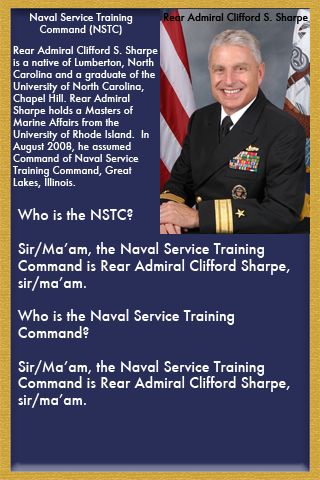
<style>
.page{position:relative;width:320px;height:480px;background:#292e59}
.page>*{position:absolute;margin:0}
.t1{font:10px "Futura-Medium";color:#ffffff}
.t2{font:10px "Futura-Medium";color:#000000}
.t3{font:14px "Futura-Medium";color:#ffffff}
</style>
<div class="page">
<p class="t1" style="left:30px;top:13px;width:103px;height:22px;text-align:center">Naval Service Training<br>Command (NSTC)</p>
<p class="t2" style="left:164px;top:13px;width:144px;height:11px">Rear Admiral Clifford S. Sharpe</p>
<p class="t1" style="left:12px;top:46px;width:146px;height:142px">Rear Admiral Clifford S. Sharpe <br>is a native of Lumberton, North <br>Carolina and a graduate of the <br>University of North Carolina, <br>Chapel Hill. Rear Admiral <br>Sharpe holds a Masters of <br>Marine Affairs from the <br>University of Rhode Island.  In <br>August 2008, he assumed <br>Command of Naval Service <br>Training Command, Great <br>Lakes, Illinois.</p>
<p class="t3" style="left:17px;top:208px;width:273px;height:200px">Who is the NSTC?<br><br>Sir/Ma’am, the Naval Service Training<br>Command is Rear Admiral Clifford Sharpe, <br>sir/ma’am.<br><br>Who is the Naval Service Training <br>Command?<br><br>Sir/Ma’am, the Naval Service Training<br>Command is Rear Admiral Clifford Sharpe, <br>sir/ma’am.</p>
</div>
